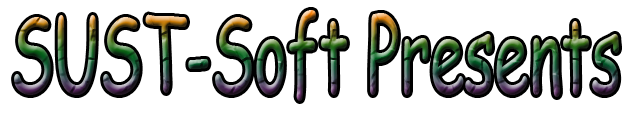
<style>
.page{position:relative;width:640px;height:121px;background:#ffffff}
.page>*{position:absolute;margin:0}
.t1{font:105.8px "ComicSansMS";scale:0.59 1}
</style>
<div class="page">
<p class="t1" style="left:14px;top:10px;width:605px;height:91px">SUST-Soft Presents</p>
</div>
